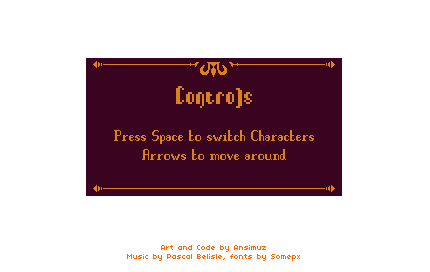
<style>
.page{position:relative;width:430px;height:272px;background:#ffffff}
.page>*{position:absolute;margin:0}
.t1{font:32.3px "Phantex";color:#d9821e}
.t2{font:16.2px "Pleurisy";color:#d9821e}
.t3{font:8.1px "04b03";color:#ff6600}
</style>
<div class="page">
<p class="t1" style="left:176px;top:86px;width:76px;height:22px">Controls</p>
<p class="t2" style="left:114px;top:130px;width:200px;height:30px;text-align:center">Press Space to switch Characters<br>Arrows to move around</p>
<p class="t3" style="left:127px;top:245px;width:173px;height:16px;text-align:center">Art and Code by Ansimuz<br>Music by Pascal Belisle, fonts by Somepx</p>
</div>
